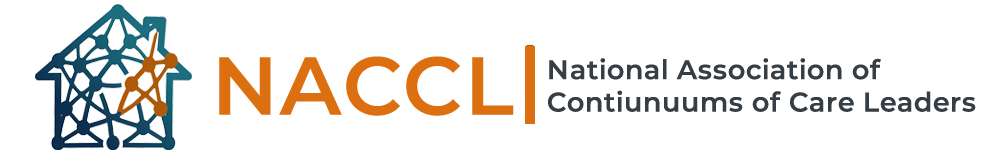
<style>
.page{position:relative;width:990px;height:166px;background:#ffffff}
.page>*{position:absolute;margin:0}
.t1{font:82px "Montserrat-SemiBold";letter-spacing:0.025em;color:#dc7011;text-transform:uppercase}
.t2{font:27px "Montserrat-SemiBold";letter-spacing:0.025em;color:#353e45}
</style>
<div class="page">
<p class="t1" style="left:219px;top:56px;width:295px;height:60px">NACCL</p>
<p class="t2" style="left:548px;top:58px;width:428px;height:54px">National Association of <br>Contiunuums of Care Leaders</p>
</div>
